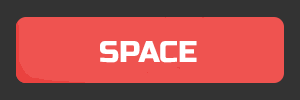
<style>
.page{position:relative;width:300px;height:100px;background:#ef5350}
.page>*{position:absolute;margin:0}
.t1{font:30px "RussoOne-Regular";color:#ffffff}
</style>
<div class="page">
<p class="t1" style="left:100px;top:41px;width:97px;height:22px">SPACE</p>
</div>
